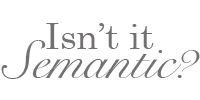
<style>
.page{position:relative;width:200px;height:100px;background:#ffffff}
.page>*{position:absolute;margin:0}
.t1{font:36px "CenturySchoolbook";letter-spacing:-0.005em;color:#737070}
.t2{font:53px "SnellRoundhand";letter-spacing:-0.005em;color:#737070}
</style>
<div class="page">
<p class="t1" style="left:46px;top:23px;width:108px;height:26px">Isn’t it</p>
<p class="t2" style="left:1px;top:40px;width:199px;height:39px">Semantic?</p>
</div>
